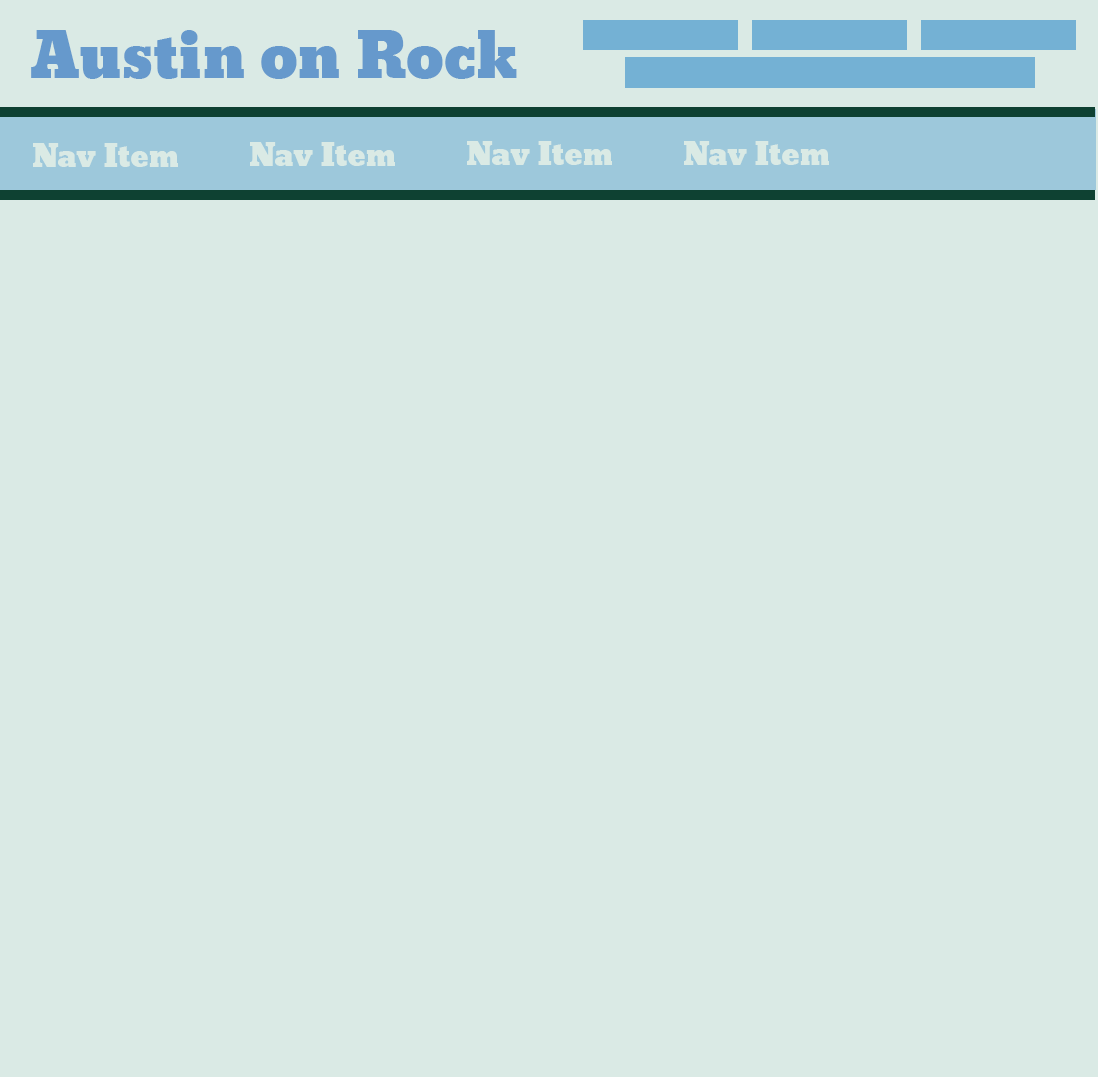
<style>
.page{position:relative;width:1100px;height:1080px;background:#daeae5}
.page>*{position:absolute;margin:0}
.t1{font:60px "Bevan";color:#6699cc}
.t2{font:30px "Bevan";color:#daeae5}
</style>
<div class="page">
<p class="t1" style="left:31px;top:30px;width:486px;height:49px">Austin on Rock</p>
<p class="t2" style="left:33px;top:143px;width:145px;height:24px">Nav Item</p>
<p class="t2" style="left:250px;top:142px;width:145px;height:24px">Nav Item</p>
<p class="t2" style="left:467px;top:141px;width:145px;height:24px">Nav Item</p>
<p class="t2" style="left:684px;top:141px;width:145px;height:24px">Nav Item</p>
</div>
